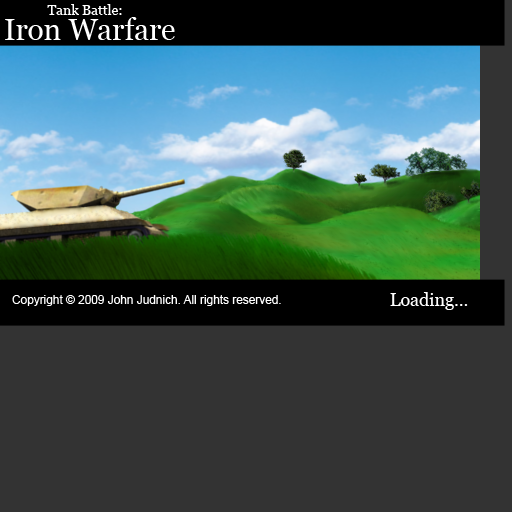
<style>
.page{position:relative;width:512px;height:512px;background:#333333}
.page>*{position:absolute;margin:0}
.t1{font:13.8px "Georgia";color:#ffffff}
.t2{font:29.6px "Georgia";color:#ffffff}
.t3{font:5.9px "Georgia";color:#000000}
.t4{font:17.8px "Georgia";color:#ffffff}
.t5{font:11.9px "ArialMT";color:#ffffff}
</style>
<div class="page">
<p class="t1" style="left:47px;top:4px;width:75px;height:11px">Tank Battle:</p>
<p class="t2" style="left:5px;top:17px;width:170px;height:23px">Iron Warfare</p>
<p class="t3" style="left:111px;top:197px;width:8px;height:6px;opacity:0.62">JL</p>
<p class="t4" style="left:390px;top:292px;width:78px;height:18px">Loading...</p>
<p class="t5" style="left:12px;top:295px;width:269px;height:11px">Copyright © 2009 John Judnich. All rights reserved.</p>
</div>
